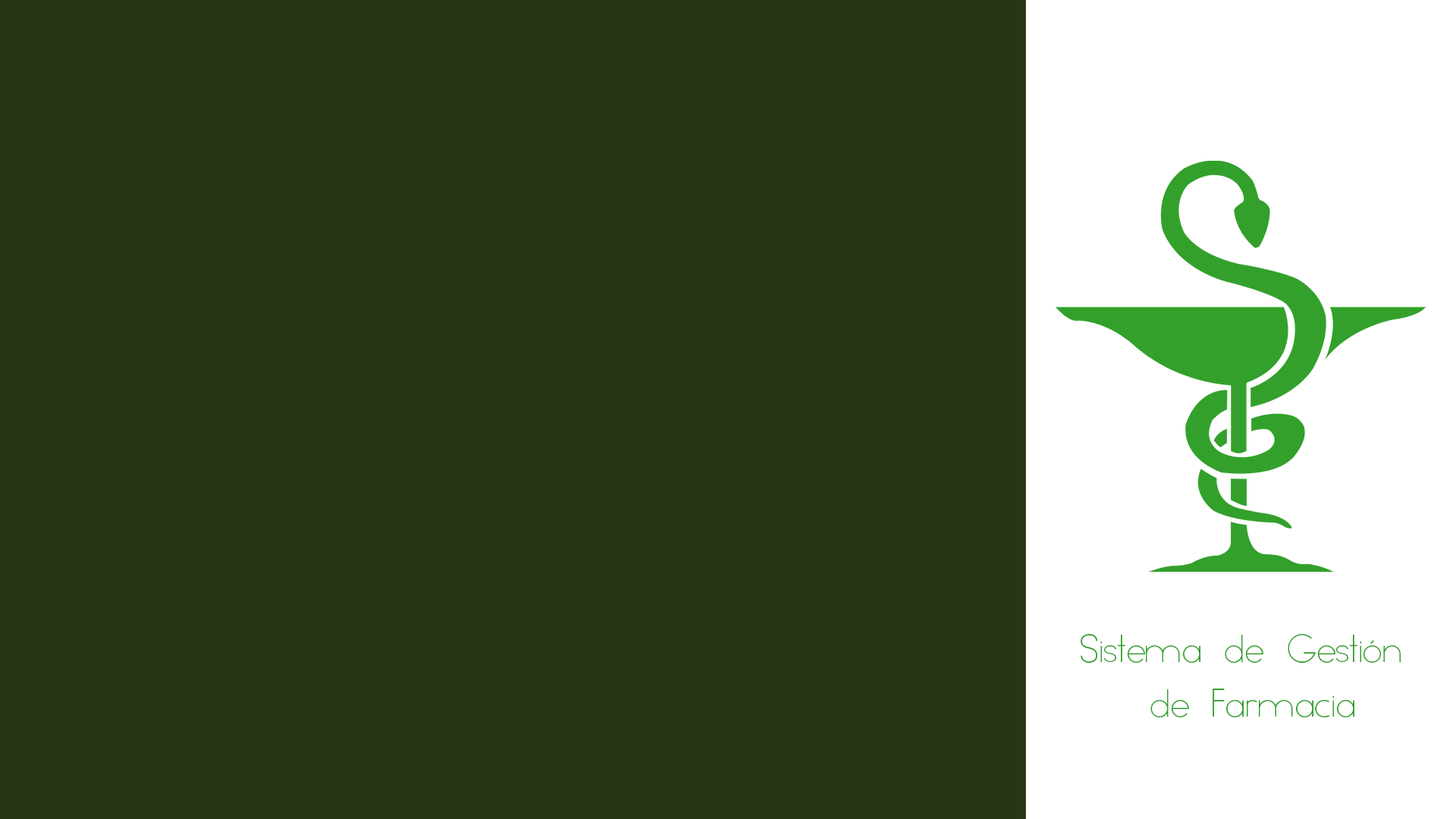
<style>
.page{position:relative;width:1456px;height:819px;background:#283616}
.page>*{position:absolute;margin:0}
.t1{font:45.5px "Minimal";color:#329f2b}
</style>
<div class="page">
<p class="t1" style="left:1081px;top:634px;width:320px;height:83px;text-align:center">Sistema de Gestión <br>de Farmacia</p>
</div>
